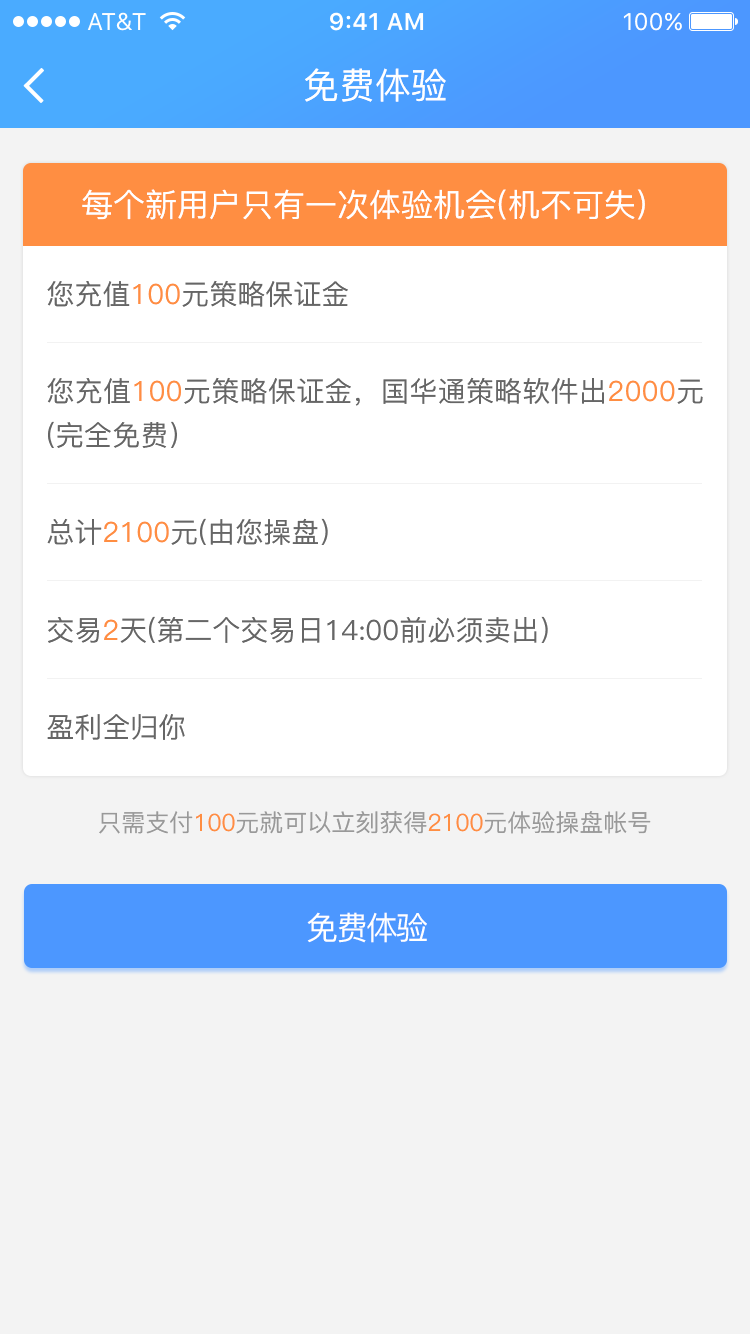
<style>
.page{position:relative;width:750px;height:1334px;background:#f3f3f3}
.page>*{position:absolute;margin:0}
.t1{font:36px "PingFang-SC-Medium";color:#ffffff}
.t2{font:32px "PingFang-SC-Medium";color:#ffffff}
.t3{font:28px "PingFang-SC-Medium";color:#666666}
.t4{font:28px "PingFang-SC-Medium";color:#ff8e42}
.t5{font:28px/44px "PingFang-SC-Medium";letter-spacing:0.01em;color:#666666}
.t6{font:28px/44px "PingFang-SC-Medium";letter-spacing:0.01em;color:#ff8e42}
.t7{font:24px "PingFang-SC-Medium";color:#999999}
.t8{font:24px "PingFang-SC-Medium";color:#ff8e42}
.t9{font:32px "PingFang-SC-Medium";letter-spacing:-0.06em;color:#ffffff}
</style>
<div class="page">
<p class="t1" style="left:305px;top:68px;width:141px;height:34px">免费体验</p>
<p class="t2" style="left:82px;top:189px;width:563px;height:31px">每个新用户只有一次体验机会(机不可失)</p>
<p class="t3" style="left:47px;top:280px;width:301px;height:27px">您充值<span class="t4">100</span>元策略保证金</p>
<p class="t5" style="left:47px;top:377px;width:656px;height:71px">您充值<span class="t6">100</span>元策略保证金，国华通策略软件出<span class="t6">2000</span>元<br>(完全免费）</p>
<p class="t3" style="left:47px;top:518px;width:281px;height:27px">总计<span class="t4">2100</span>元(由您操盘）</p>
<p class="t3" style="left:48px;top:616px;width:500px;height:27px">交易<span class="t4">2</span>天(第二个交易日14:00前必须卖出）</p>
<p class="t3" style="left:47px;top:714px;width:138px;height:26px">盈利全归你</p>
<p class="t7" style="left:99px;top:811px;width:552px;height:23px">只需支付<span class="t8">100</span>元就可以立刻获得<span class="t8">2100</span>元体验操盘帐号</p>
<p class="t9" style="left:307px;top:912px;width:120px;height:31px">免费体验</p>
</div>
